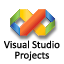
<style>
.page{position:relative;width:64px;height:64px;background:#ffffff}
.page>*{position:absolute;margin:0}
.t1{font:10.7px "Calibri";color:#000000}
</style>
<div class="page">
<p class="t1" style="left:4px;top:40px;width:56px;height:9px">Visual Studio</p>
<p class="t1" style="left:15px;top:51px;width:34px;height:10px">Projects</p>
</div>
